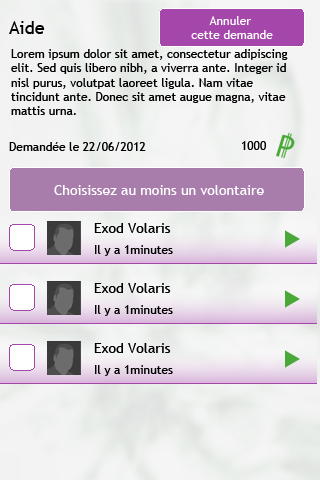
<style>
.page{position:relative;width:320px;height:480px}
.page>*{position:absolute;margin:0}
.t1{font:12px "TrebuchetMS";color:#ffffff}
.t2{font:18px "TrebuchetMS";color:#000000}
.t3{font:12px "TrebuchetMS";color:#000000}
.t4{font:14px "TrebuchetMS";color:#ffffff}
.t5{font:14px "TrebuchetMS";color:#000000}
</style>
<div class="page">
<p class="t1" style="left:191px;top:16px;width:82px;height:23px;text-align:center">Annuler <br>cette demande</p>
<p class="t2" style="left:9px;top:21px;width:36px;height:13px">Aide</p>
<p class="t3" style="left:11px;top:49px;width:277px;height:66px">Lorem ipsum dolor sit amet, consectetur adipiscing elit. Sed quis libero nibh, a viverra ante. Integer id nisl purus, volutpat laoreet ligula. Nam vitae tincidunt ante. Donec sit amet augue magna, vitae mattis urna.</p>
<p class="t3" style="left:9px;top:142px;width:137px;height:9px">Demandée le 22/06/2012</p>
<p class="t3" style="left:242px;top:141px;width:24px;height:9px">1000</p>
<p class="t4" style="left:54px;top:185px;width:210px;height:10px">Choisissez au moins un volontaire</p>
<p class="t5" style="left:94px;top:223px;width:77px;height:10px">Exod Volaris</p>
<p class="t3" style="left:95px;top:245px;width:78px;height:11px">Il y a 1minutes</p>
<p class="t5" style="left:94px;top:283px;width:77px;height:10px">Exod Volaris</p>
<p class="t3" style="left:95px;top:305px;width:78px;height:11px">Il y a 1minutes</p>
<p class="t5" style="left:94px;top:343px;width:77px;height:10px">Exod Volaris</p>
<p class="t3" style="left:95px;top:365px;width:78px;height:11px">Il y a 1minutes</p>
</div>
